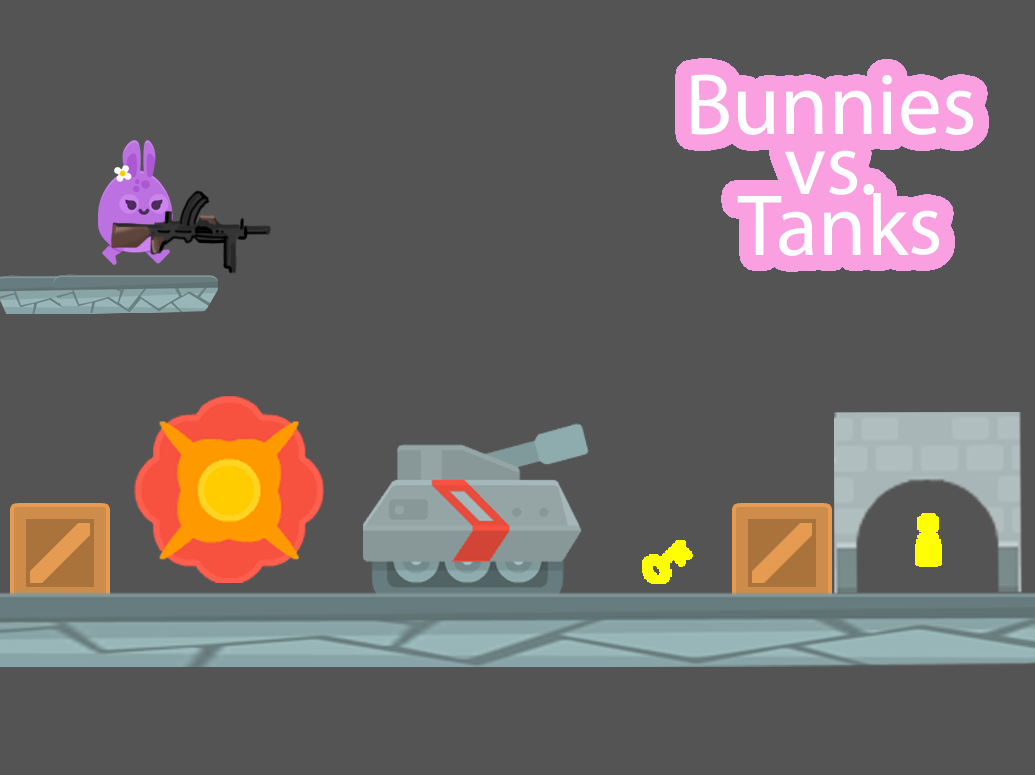
<style>
.page{position:relative;width:1035px;height:775px;background:#545454}
.page>*{position:absolute;margin:0}
.t1{font:87.4px/60.4px "MyriadPro-Regular";color:#ffffff}
</style>
<div class="page">
<p class="t1" style="left:691px;top:74px;width:282px;height:182px;text-align:center">Bunnies <br>vs. <br>Tanks</p>
</div>
